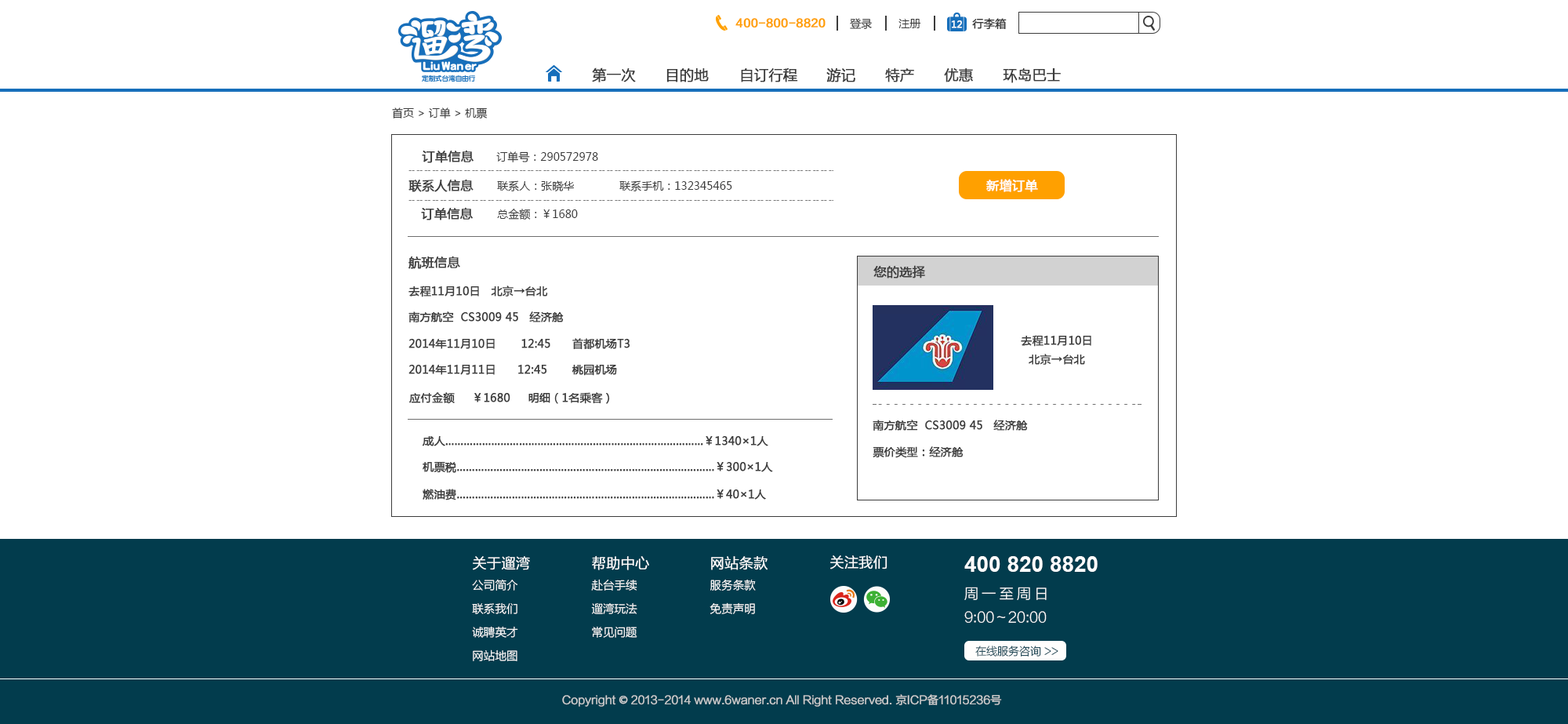
<style>
.page{position:relative;width:1568px;height:724px;background:#ffffff}
.page>*{position:absolute;margin:0}
.t1{font:11px "FZLTZHK--GBK1-0";color:#ffa000;font-weight:bold}
.t2{font:11px "MicrosoftYaHei";color:#3c3c3c}
.t3{font:9.4px "MicrosoftYaHei";color:#fefefe;font-weight:bold}
.t4{font:11px "MicrosoftYaHei";color:#3c3c3c;font-weight:bold}
.t5{font:14.1px "MicrosoftYaHei";color:#3c3c3c;font-weight:bold}
.t6{font:12.5px "MicrosoftYaHei";color:#3c3c3c;font-weight:bold}
.t7{font:12.5px "MicrosoftYaHei";color:#ffffff;font-weight:bold}
.t8{font:11px/18.8px "MicrosoftYaHei";color:#3c3c3c;font-weight:bold}
.t9{font:11.4px/23.5px "FZLTXHK--GBK1-0";color:#ffffff}
.t10{font:14.1px/23.5px "FZLTXHK--GBK1-0";color:#ffffff;font-weight:bold}
.t11{font:14.1px "FZLTXHK--GBK1-0";color:#ffffff;font-weight:bold}
.t12{font:22px "Arial-BoldMT";color:#ffffff}
.t13{font:14.1px/23.5px "FZLTXHK--GBK1-0";color:#ffffff}
.t14{font:14.1px/23.5px "FZLTXHK--GBK1-0";letter-spacing:0.24em;color:#ffffff}
.t15{font:11px "FZLTXHK--GBK1-0"}
.t16{font:11px "FZLTXHK--GBK1-0";color:#d0d0d0;font-weight:bold}
.t17{font:11px "AdobeHeitiStd-Regular";color:#d0d0d0;font-weight:bold}
</style>
<div class="page">
<p class="t1" style="left:735px;top:18px;width:91px;height:10px">400-800-8820</p>
<p class="t2" style="left:850px;top:18px;width:22px;height:11px">登录</p>
<p class="t2" style="left:898px;top:19px;width:23px;height:9px">注册</p>
<p class="t3" style="left:951px;top:20px;width:11px;height:8px">12</p>
<p class="t4" style="left:972px;top:18px;width:35px;height:12px">行李箱</p>
<p class="t5" style="left:592px;top:67px;width:44px;height:15px">第一次</p>
<p class="t5" style="left:666px;top:68px;width:43px;height:14px">目的地</p>
<p class="t5" style="left:741px;top:68px;width:57px;height:14px">自订行程</p>
<p class="t5" style="left:826px;top:68px;width:29px;height:14px">游记</p>
<p class="t5" style="left:885px;top:68px;width:29px;height:14px">特产</p>
<p class="t5" style="left:944px;top:68px;width:29px;height:14px">优惠</p>
<p class="t5" style="left:1003px;top:68px;width:58px;height:15px">环岛巴士</p>
<p class="t2" style="left:392px;top:107px;width:96px;height:11px">首页 &gt; 订单 &gt; 机票</p>
<p class="t6" style="left:422px;top:150px;width:52px;height:13px">订单信息</p>
<p class="t2" style="left:496px;top:151px;width:102px;height:11px">订单号：290572978</p>
<p class="t6" style="left:408px;top:179px;width:66px;height:13px">联系人信息</p>
<p class="t2" style="left:497px;top:180px;width:235px;height:11px">联系人：张晓华              联系手机：132345465</p>
<p class="t7" style="left:986px;top:179px;width:52px;height:13px">新增订单</p>
<p class="t6" style="left:421px;top:207px;width:52px;height:13px">订单信息</p>
<p class="t2" style="left:497px;top:209px;width:81px;height:11px">总金额：￥1680</p>
<p class="t6" style="left:408px;top:256px;width:52px;height:13px">航班信息</p>
<p class="t6" style="left:873px;top:265px;width:52px;height:13px">您的选择</p>
<p class="t4" style="left:408px;top:285px;width:140px;height:12px">去程11月10日   北京→台北</p>
<p class="t4" style="left:408px;top:311px;width:156px;height:12px">南方航空  CS3009 45   经济舱</p>
<p class="t4" style="left:408px;top:338px;width:222px;height:12px">2014年11月10日       12:45      首都机场T3</p>
<p class="t8" style="left:1021px;top:335px;width:70px;height:30px;text-align:center">去程11月10日<br>北京→台北</p>
<p class="t4" style="left:408px;top:364px;width:209px;height:12px">2014年11月11日      12:45       桃园机场</p>
<p class="t4" style="left:409px;top:392px;width:201px;height:12px">应付金额     ￥1680     明细（1名乘客）</p>
<p class="t4" style="left:873px;top:419px;width:155px;height:12px">南方航空  CS3009 45   经济舱</p>
<p class="t4" style="left:422px;top:436px;width:346px;height:10px">成人…………………………………………………………………………￥1340×1人</p>
<p class="t4" style="left:873px;top:446px;width:91px;height:12px">票价类型：经济舱</p>
<p class="t4" style="left:423px;top:461px;width:350px;height:12px">机票税…………………………………………………………………………￥300×1人</p>
<p class="t4" style="left:423px;top:488px;width:343px;height:12px">燃油费…………………………………………………………………………￥40×1人</p>
<p class="t9" style="left:472px;top:556px;width:58px;height:105px"><span class="t10">关于遛湾<br></span>公司简介<br>联系我们<br>诚聘英才<br>网站地图</p>
<p class="t9" style="left:591px;top:555px;width:58px;height:82px"><span class="t10">帮助中心<br></span>赴台手续 <br>遛湾玩法 <br>常见问题</p>
<p class="t9" style="left:710px;top:556px;width:58px;height:58px"><span class="t10">网站条款 <br></span>服务条款<br>免责声明</p>
<p class="t11" style="left:830px;top:555px;width:57px;height:14px">关注我们</p>
<p class="t12" style="left:964px;top:556px;width:134px;height:16px">400 820 8820</p>
<p class="t13" style="left:964px;top:586px;width:83px;height:36px"><span class="t14">周一至周日<br></span>9:00～20:00</p>
<p class="t15" style="left:975px;top:645px;width:83px;height:11px">在线服务咨询 &gt;&gt;</p>
<p class="t16" style="left:562px;top:694px;width:440px;height:12px">Copyright <span class="t17">©</span> 2013-2014 www.6waner.cn All Right Reserved. 京ICP备11015236号</p>
</div>
